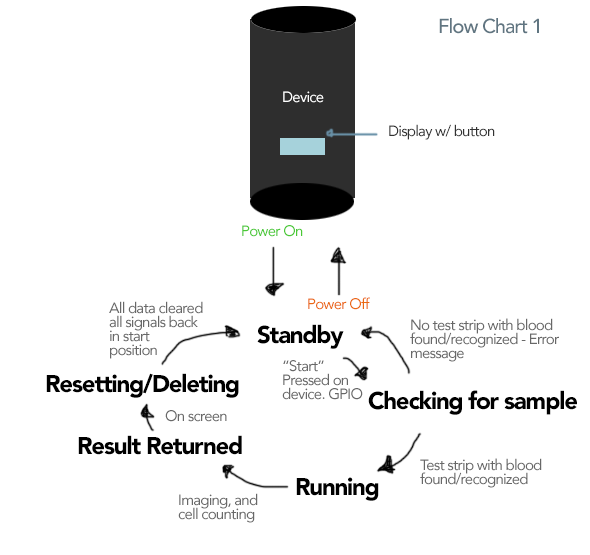
<style>
.page{position:relative;width:590px;height:555px;background:#ffffff}
.page>*{position:absolute;margin:0}
.t1{font:20px "Avenir-Medium";letter-spacing:-0.05em;color:#607581}
.t2{font:15px "Avenir-Roman";letter-spacing:-0.05em;color:#323232}
.t3{font:15px "Avenir-Roman";letter-spacing:-0.05em;color:#4ac935}
.t4{font:15px/14px "Avenir-Roman";letter-spacing:-0.05em;color:#686868}
.t5{font:15px "Avenir-Roman";letter-spacing:-0.05em;color:#eb6912}
.t6{font:24px "Avenir-Black";letter-spacing:-0.05em;color:#000000}
.t7{font:15px "Avenir-Roman";letter-spacing:-0.05em;color:#686868}
</style>
<div class="page">
<p class="t1" style="left:439px;top:18px;width:100px;height:16px">Flow Chart 1</p>
<p class="t2" style="left:389px;top:124px;width:106px;height:16px">Display w/ button</p>
<p class="t3" style="left:242px;top:225px;width:61px;height:12px">Power On</p>
<p class="t4" style="left:109px;top:301px;width:94px;height:58px">All data cleared<br>all signals back<br>in start<br>position</p>
<p class="t5" style="left:308px;top:297px;width:62px;height:13px">Power Off</p>
<p class="t4" style="left:410px;top:318px;width:149px;height:44px">No test strip with blood<br>found/recognized - Error<br>message</p>
<p class="t6" style="left:257px;top:324px;width:87px;height:25px">Standby</p>
<p class="t4" style="left:282px;top:360px;width:81px;height:40px">“Start”<br>Pressed on<br>device. GPIO</p>
<p class="t6" style="left:46px;top:373px;width:193px;height:25px">Resetting/Deleting</p>
<p class="t6" style="left:368px;top:390px;width:209px;height:25px">Checking for sample</p>
<p class="t7" style="left:165px;top:410px;width:62px;height:12px">On screen</p>
<p class="t6" style="left:78px;top:435px;width:164px;height:20px">Result Returned</p>
<p class="t4" style="left:420px;top:458px;width:122px;height:30px">Test strip with blood <br>found/recognized</p>
<p class="t6" style="left:296px;top:477px;width:83px;height:24px">Running</p>
<p class="t4" style="left:178px;top:493px;width:80px;height:30px">Imaging, and <br>cell counting</p>
</div>
